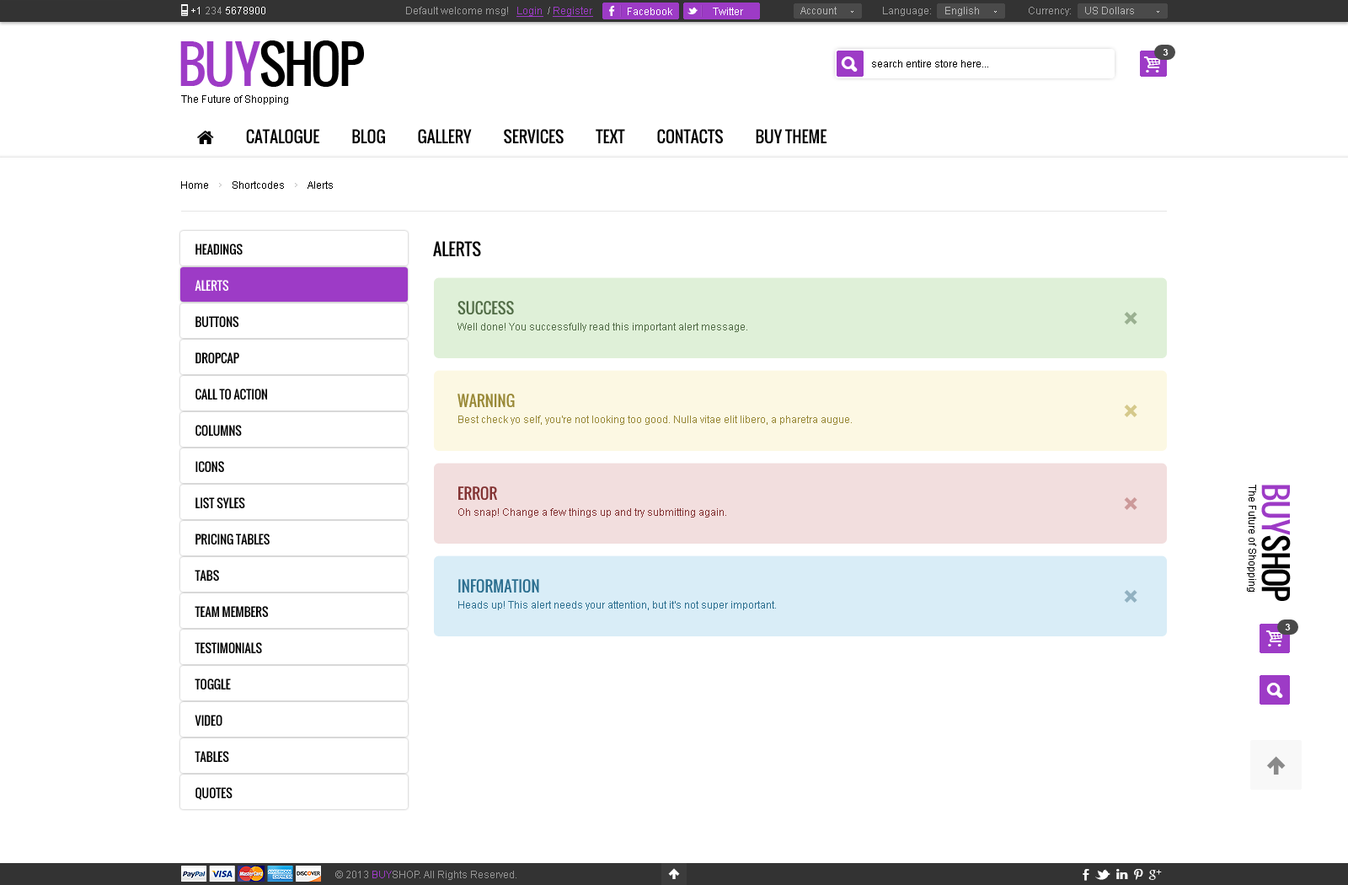
<style>
.page{position:relative;width:1348px;height:885px;background:#ffffff}
.page>*{position:absolute;margin:0}
.t1{font:10.1px "ArialMT";color:#ffffff}
.t2{font:10.1px "ArialMT";color:#9b9b9b}
.t3{font:10.1px "ArialMT";color:#9d3bc6;text-decoration:underline}
.t4{font:10.1px "ArialMT";color:#b6b6b6}
.t5{font:50.5px "Oswald";letter-spacing:-0.06em;color:#000000;text-transform:uppercase}
.t6{font:50.5px "Oswald";letter-spacing:-0.06em;color:#9d3bc6;text-transform:uppercase}
.t7{font:9.3px "Arial-BoldMT";color:#ffffff;text-transform:uppercase}
.t8{font:10.1px "ArialMT";color:#000000}
.t9{font:11.8px/36.2px "Oswald";color:#000000;text-transform:uppercase}
.t10{font:11.8px/36.2px "Oswald";color:#ffffff;text-transform:uppercase}
.t11{font:16.8px "Oswald";color:#000000;text-transform:uppercase}
.t12{font:15.2px "Oswald";color:#516c46;text-transform:uppercase}
.t13{font:16.8px "andepict";color:#9ab091;text-transform:uppercase}
.t14{font:10.1px "ArialMT";color:#516c46}
.t15{font:15.2px "Oswald";color:#998937;text-transform:uppercase}
.t16{font:16.8px "andepict";color:#d5c98b;text-transform:uppercase}
.t17{font:10.1px "ArialMT";color:#998937}
.t18{font:32px "Oswald";letter-spacing:-0.06em;color:#000000;text-transform:uppercase}
.t19{font:32px "Oswald";letter-spacing:-0.06em;color:#9d3bc6;text-transform:uppercase}
.t20{font:15.2px "Oswald";color:#833333;text-transform:uppercase}
.t21{font:16.8px "andepict";color:#cc9999;text-transform:uppercase}
.t22{font:10.1px "ArialMT";color:#833333}
.t23{font:15.2px "Oswald";color:#2c6f90;text-transform:uppercase}
.t24{font:16.8px "andepict";color:#91b1c1;text-transform:uppercase}
.t25{font:10.1px "ArialMT";color:#2c6f90}
.t26{font:10.1px "ArialMT";color:#959595}
.t27{font:10.1px "ArialMT";color:#9d3bc6}
</style>
<div class="page">
<p class="t1" style="left:191px;top:7px;width:74px;height:7px">+1 <span class="t2">234 </span>5678900</p>
<p class="t2" style="left:406px;top:7px;width:187px;height:10px">Default welcome msg!   <span class="t3">Login </span> / <span class="t3">Register</span></p>
<p class="t2" style="left:406px;top:7px;width:187px;height:10px">Default welcome msg!   <span class="t3">Login </span> / <span class="t3">Register</span></p>
<p class="t1" style="left:628px;top:8px;width:44px;height:7px">Facebook</p>
<p class="t1" style="left:713px;top:8px;width:30px;height:7px">Twitter</p>
<p class="t4" style="left:800px;top:7px;width:37px;height:7px">Account</p>
<p class="t2" style="left:883px;top:7px;width:96px;height:9px">Language:     <span class="t4">English</span></p>
<p class="t4" style="left:1029px;top:7px;width:105px;height:9px"><span class="t2">Currency:     </span>US Dollars</p>
<p class="t5" style="left:180px;top:40px;width:184px;height:47px"><span class="t6">buy</span>shop</p>
<p class="t7" style="left:1163px;top:49px;width:6px;height:7px">3</p>
<p class="t8" style="left:872px;top:60px;width:116px;height:7px">search entire store here...</p>
<p class="t8" style="left:181px;top:95px;width:107px;height:9px">The Future of Shopping</p>
<p class="t8" style="left:181px;top:181px;width:152px;height:8px">Home         Shortcodes         Alerts</p>
<p class="t9" style="left:195px;top:243px;width:75px;height:557px">Headings<br><span class="t10">Alerts<br></span>Buttons<br>Dropcap<br>Call To Action<br>Columns<br>Icons<br>List syles<br>Pricing Tables<br>Tabs<br>Team Members<br>Testimonials<br>Toggle<br>Video<br>Tables<br>Quotes</p>
<p class="t11" style="left:433px;top:241px;width:48px;height:16px">alerts</p>
<p class="t12" style="left:457px;top:301px;width:57px;height:14px">Success</p>
<p class="t13" style="left:1124px;top:312px;width:13px;height:12px">✕</p>
<p class="t14" style="left:457px;top:323px;width:290px;height:9px">Well done! You successfully read this important alert message.</p>
<p class="t15" style="left:457px;top:393px;width:58px;height:15px">Warning</p>
<p class="t16" style="left:1124px;top:404px;width:13px;height:13px">✕</p>
<p class="t17" style="left:458px;top:415px;width:394px;height:10px">Best check yo self, you're not looking too good. Nulla vitae elit libero, a pharetra augue.</p>
<p class="t8" style="left:1247px;top:484px;width:9px;height:107px;rotate:90deg">The Future of Shopping</p>
<p class="t18" style="left:1261px;top:484px;width:30px;height:117px;rotate:90deg"><span class="t19">buy</span>shop</p>
<p class="t20" style="left:458px;top:486px;width:39px;height:14px">Error</p>
<p class="t21" style="left:1124px;top:497px;width:13px;height:13px">✕</p>
<p class="t22" style="left:458px;top:508px;width:268px;height:9px">Oh snap! Change a few things up and try submitting again.</p>
<p class="t23" style="left:458px;top:579px;width:81px;height:14px">Information</p>
<p class="t24" style="left:1124px;top:590px;width:13px;height:12px">✕</p>
<p class="t25" style="left:458px;top:601px;width:318px;height:9px">Heads up! This alert needs your attention, but it's not super important.</p>
<p class="t7" style="left:1285px;top:623px;width:6px;height:7px">3</p>
<p class="t26" style="left:335px;top:870px;width:181px;height:10px">© 2013 <span class="t27">BUY</span>SHOP. All Rights Reserved.</p>
</div>
